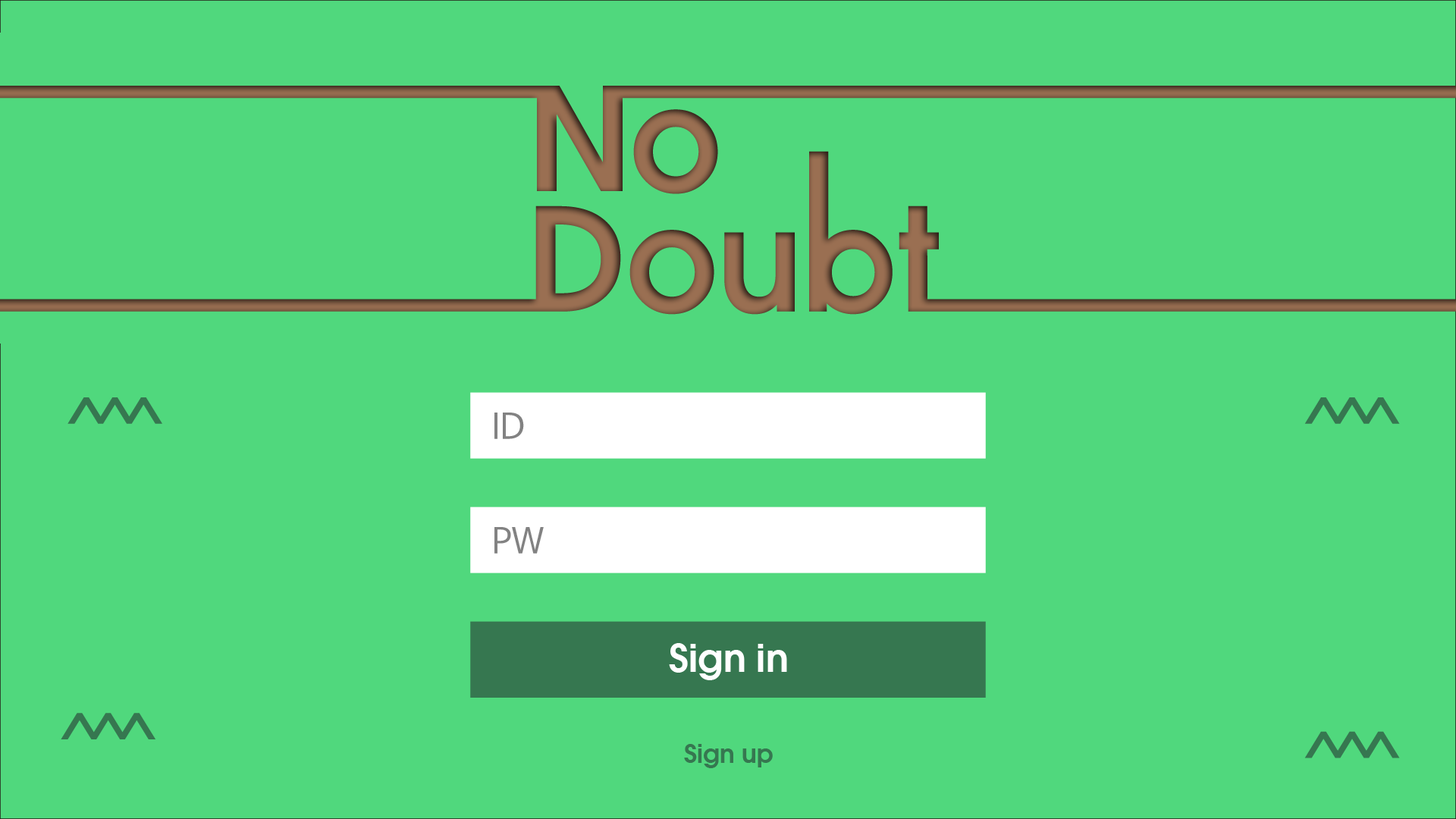
<style>
.page{position:relative;width:1456px;height:819px;background:#50d87d}
.page>*{position:absolute;margin:0}
.t1{font:34.8px "NanumBarunGothicOTF";color:#828282}
.t2{font:37.9px "AvantGarde-Demi";color:#ffffff}
.t3{font:25.3px "AvantGarde-Demi";color:#367750}
</style>
<div class="page">
<p class="t1" style="left:494px;top:413px;width:30px;height:26px">ID</p>
<p class="t1" style="left:494px;top:527px;width:50px;height:27px">PW</p>
<p class="t2" style="left:669px;top:643px;width:118px;height:37px">Sign in</p>
<p class="t3" style="left:684px;top:744px;width:89px;height:24px">Sign up</p>
</div>
